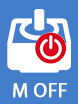
<style>
.page{position:relative;width:78px;height:104px;background:#437ecb}
.page>*{position:absolute;margin:0}
.t1{font:20px "MyriadPro-Regular";color:#ffffff;text-transform:uppercase;font-weight:bold}
</style>
<div class="page">
<p class="t1" style="left:13px;top:83px;width:54px;height:15px">M OFF</p>
</div>
